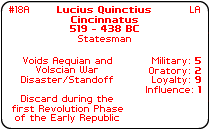
<style>
.page{position:relative;width:210px;height:130px;background:#ffffff}
.page>*{position:absolute;margin:0}
.t1{font:8px "PFTempestaSeven";color:#ff0000}
.t2{font:8px "PFTempestaSeven-Bold";color:#ff0000}
.t3{font:8px "PFTempestaSeven";color:#fe0000}
</style>
<div class="page">
<p class="t1" style="left:9px;top:6px;width:20px;height:7px">#18A</p>
<p class="t2" style="left:57px;top:6px;width:94px;height:26px;text-align:center">Lucius Quinctius<br>Cincinnatus<br>519 - 438 BC</p>
<p class="t1" style="left:190px;top:6px;width:10px;height:7px">LA</p>
<p class="t3" style="left:78px;top:35px;width:53px;height:7px">Statesman</p>
<p class="t1" style="left:12px;top:57px;width:111px;height:66px;text-align:center">Voids Aequian and Volscian War Disaster/Standoff<br><br>Discard during the first Revolution Phase of the Early Republic</p>
<p class="t1" style="left:146px;top:57px;width:55px;height:36px;text-align:right">Military: <span class="t2">5<br></span>Oratory: <span class="t2">2<br></span>Loyalty: <span class="t2">9<br></span>Influence: <span class="t2">1</span></p>
</div>
